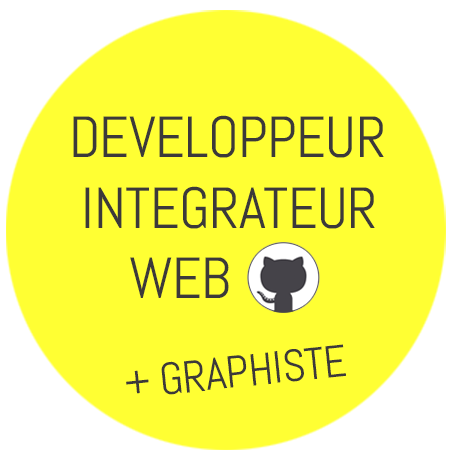
<style>
.page{position:relative;width:452px;height:454px;background:#ffff33}
.page>*{position:absolute;margin:0}
.t1{font:58px/70.2px "Abel-Regular";letter-spacing:-0.01em;color:#3c393a;font-variant:small-caps}
.t2{font:58px/10.7px "Abel-Regular";letter-spacing:-0.01em;color:#3c393a;font-variant:small-caps}
.t3{font:45px "Abel-Regular";letter-spacing:-0.01em;color:#3c393a;font-variant:small-caps}
</style>
<div class="page">
<p class="t1" style="left:73px;top:115px;width:311px;height:183px"><span class="t2">DEVELOPPEUR<br></span> INTEGRATEUR<br>    WEB</p>
<p class="t3" style="left:126px;top:344px;width:220px;height:51px;rotate:-6deg">+ GRAPHISTE</p>
</div>
